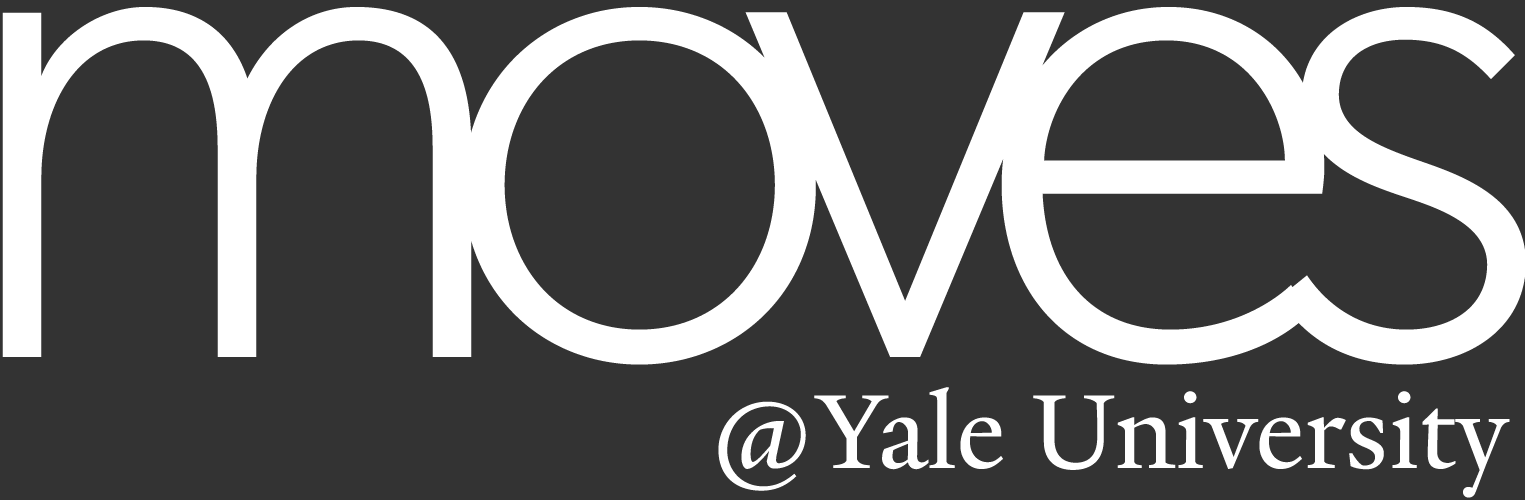
<style>
.page{position:relative;width:1525px;height:500px;background:#333333}
.page>*{position:absolute;margin:0}
.t1{font:741.4px "Gibson-Light";letter-spacing:-0.12em;color:#ffffff}
.t2{font:114px "YaleNew-Roman";color:#ffffff}
</style>
<div class="page">
<p class="t1" style="left:2px;top:7px;width:1524px;height:358px">moves</p>
<p class="t2" style="left:718px;top:387px;width:792px;height:111px">@Yale University</p>
</div>
